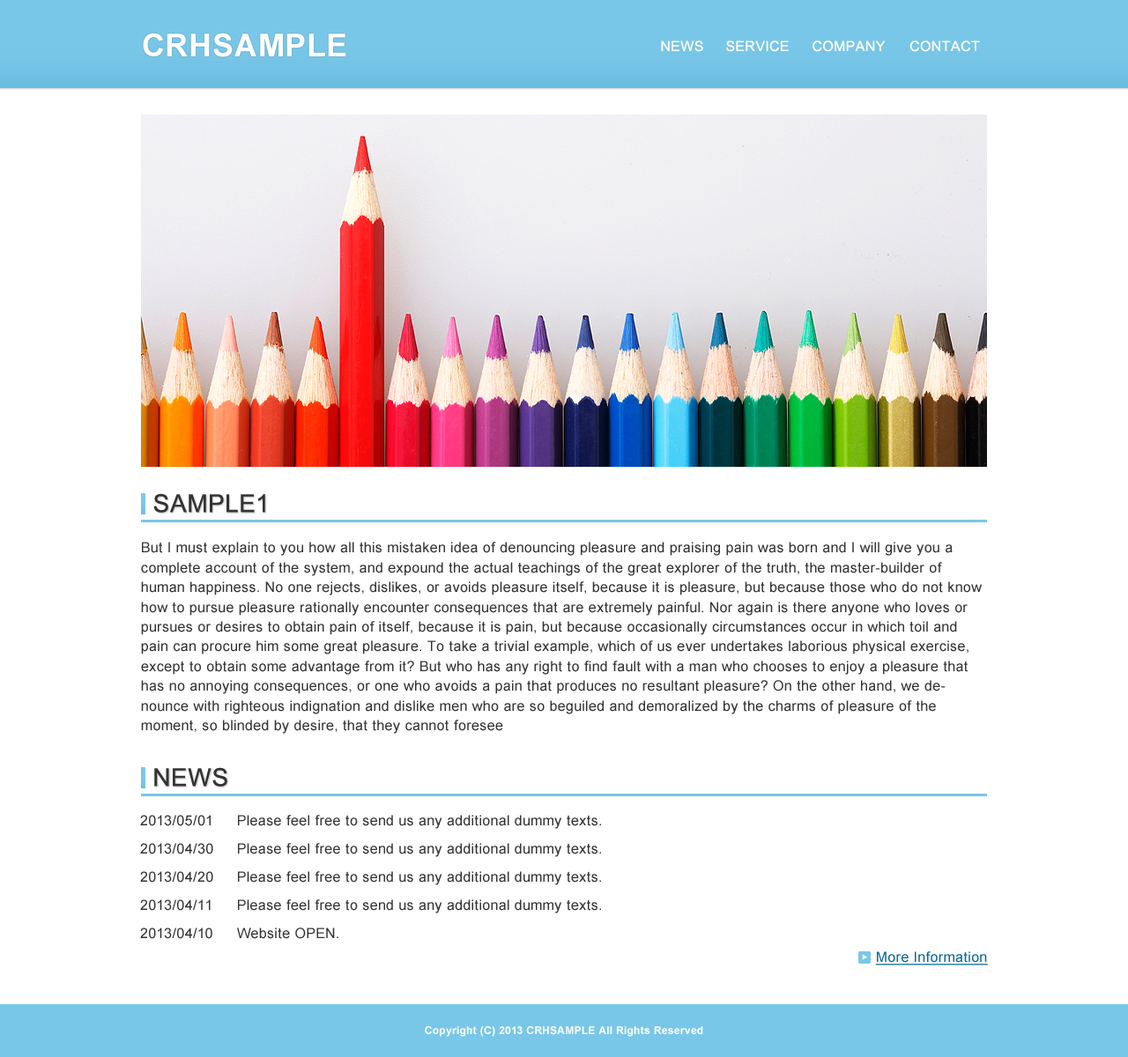
<style>
.page{position:relative;width:1128px;height:1057px;background:#ffffff}
.page>*{position:absolute;margin:0}
.t1{font:31.7px "Arial-BoldMT";letter-spacing:0.04em;color:#ffffff}
.t2{font:14.1px "ArialMT";letter-spacing:0.04em;color:#ffffff}
.t3{font:24.7px "ArialMT";letter-spacing:0.04em;color:#333333}
.t4{font:14.1px/19.7px "ArialMT";letter-spacing:0.04em;color:#333333}
.t5{font:14.1px/28.2px "ArialMT";letter-spacing:0.04em;color:#333333}
.t6{font:14.1px "ArialMT";letter-spacing:0.04em;color:#006699;text-decoration:underline}
.t7{font:5.9px "KozGoPr6N-Regular";letter-spacing:0.04em;color:#ffffff}
.t8{font:10.6px "Arial-BoldMT";letter-spacing:0.04em;color:#ffffff}
</style>
<div class="page">
<p class="t1" style="left:143px;top:33px;width:203px;height:24px">CRHSAMPLE</p>
<p class="t2" style="left:661px;top:41px;width:42px;height:11px">NEWS</p>
<p class="t2" style="left:726px;top:41px;width:63px;height:11px">SERVICE</p>
<p class="t2" style="left:812px;top:41px;width:73px;height:11px">COMPANY</p>
<p class="t2" style="left:909px;top:41px;width:71px;height:11px">CONTACT</p>
<p class="t3" style="left:153px;top:493px;width:112px;height:20px">SAMPLE1</p>
<p class="t4" style="left:141px;top:542px;width:841px;height:192px">But I must explain to you how all this mistaken idea of denouncing pleasure and praising pain was born and I will give you a complete account of the system, and expound the actual teachings of the great explorer of the truth, the master-builder of human happiness. No one rejects, dislikes, or avoids pleasure itself, because it is pleasure, but because those who do not know how to pursue pleasure rationally encounter consequences that are extremely painful. Nor again is there anyone who loves or pursues or desires to obtain pain of itself, because it is pain, but because occasionally circumstances occur in which toil and pain can procure him some great pleasure. To take a trivial example, which of us ever undertakes laborious physical exercise, except to obtain some advantage from it? But who has any right to find fault with a man who chooses to enjoy a pleasure that has no annoying consequences, or one who avoids a pain that produces no resultant pleasure? On the other hand, we denounce with righteous indignation and dislike men who are so beguiled and demoralized by the charms of pleasure of the moment, so blinded by desire, that they cannot foresee</p>
<p class="t3" style="left:154px;top:767px;width:73px;height:20px">NEWS</p>
<p class="t5" style="left:140px;top:815px;width:73px;height:124px">2013/05/01<br>2013/04/30<br>2013/04/20<br>2013/04/11<br>2013/04/10</p>
<p class="t5" style="left:237px;top:815px;width:364px;height:124px">Please feel free to send us any additional dummy texts.<br>Please feel free to send us any additional dummy texts.<br>Please feel free to send us any additional dummy texts.<br>Please feel free to send us any additional dummy texts.<br>Website OPEN.</p>
<p class="t6" style="left:875px;top:952px;width:113px;height:14px">More Information</p>
<p class="t7" style="left:862px;top:954px;width:6px;height:6px;rotate:-90deg">▼</p>
<p class="t8" style="left:425px;top:1026px;width:278px;height:11px">Copyright (C) 2013 CRHSAMPLE All Rights Reserved</p>
</div>
